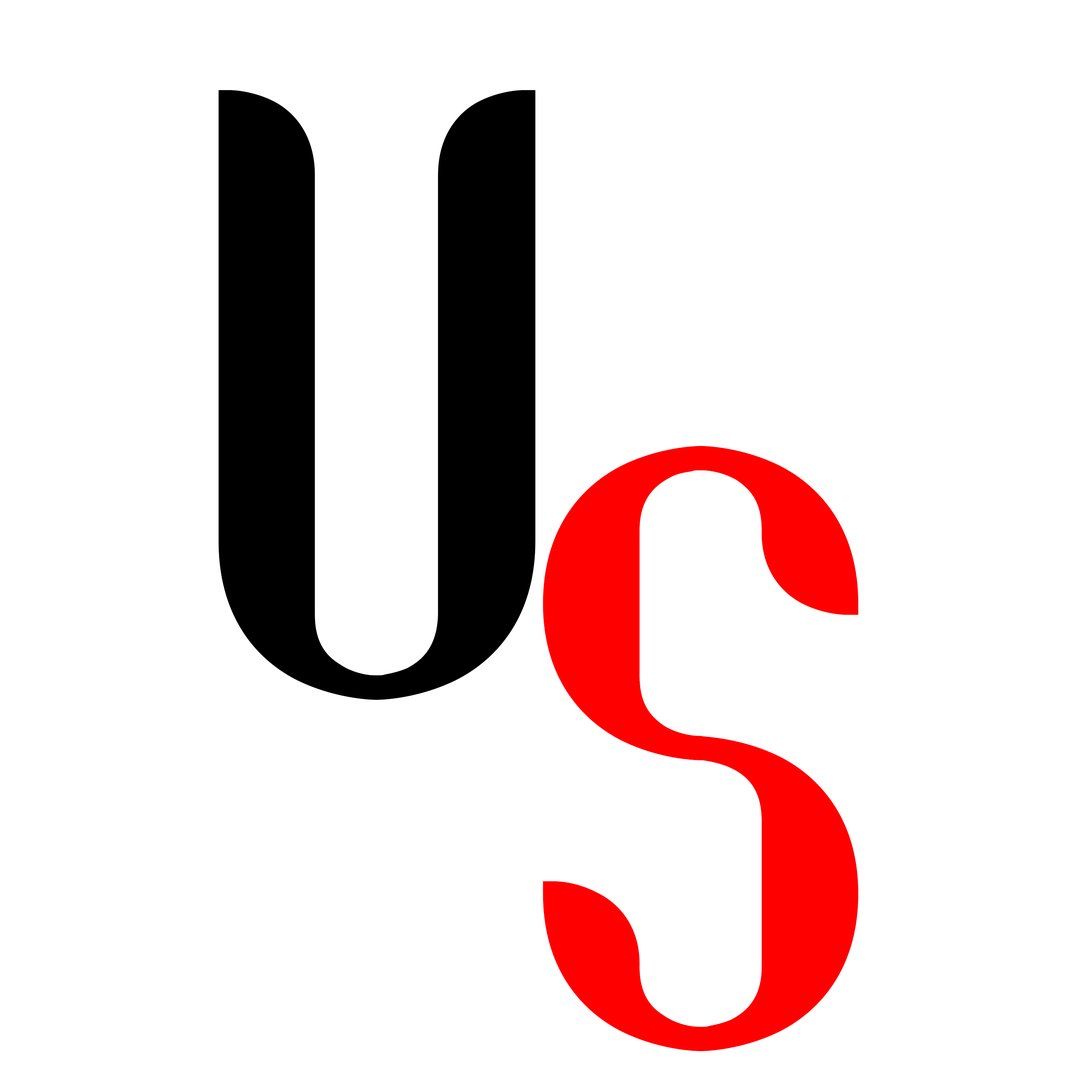
<style>
.page{position:relative;width:1092px;height:1092px;background:#ffffff}
.page>*{position:absolute;margin:0}
.t1{font:1024.9px "Coco-Bold";letter-spacing:0.05em;color:#000000}
.t2{font:1017.2px "Coco-Bold";letter-spacing:0.05em;color:#ff0000}
</style>
<div class="page">
<p class="t1" style="left:218px;top:90px;width:317px;height:610px">v</p>
<p class="t2" style="left:543px;top:446px;width:316px;height:605px">s</p>
</div>
